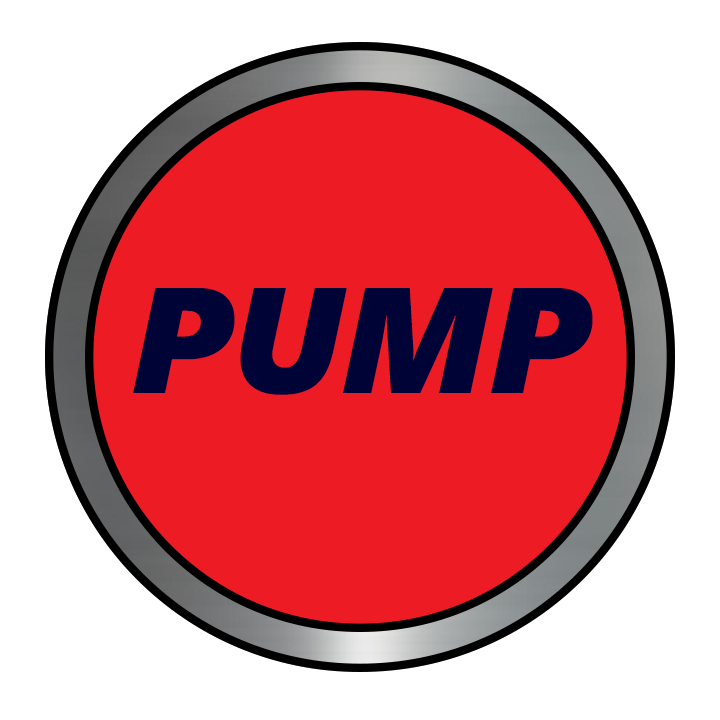
<style>
.page{position:relative;width:720px;height:720px;background:#ffffff}
.page>*{position:absolute;margin:0}
.t1{font:150px "SegoeUIBlack-Italic";color:#000336}
</style>
<div class="page">
<p class="t1" style="left:133px;top:288px;width:460px;height:107px">PUMP</p>
</div>
